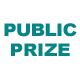
<style>
.page{position:relative;width:80px;height:80px;background:#ffffff}
.page>*{position:absolute;margin:0}
.t1{font:17.6px "Arial-Black";letter-spacing:-0.025em;color:#068587;scale:1.03 1}
.t2{font:17.6px "Arial-Black";letter-spacing:0.001em;color:#068587;scale:1.03 1}
</style>
<div class="page">
<p class="t1" style="left:4px;top:23px;width:73px;height:14px">PUBLIC</p>
<p class="t2" style="left:11px;top:43px;width:59px;height:13px">PRIZE</p>
</div>
